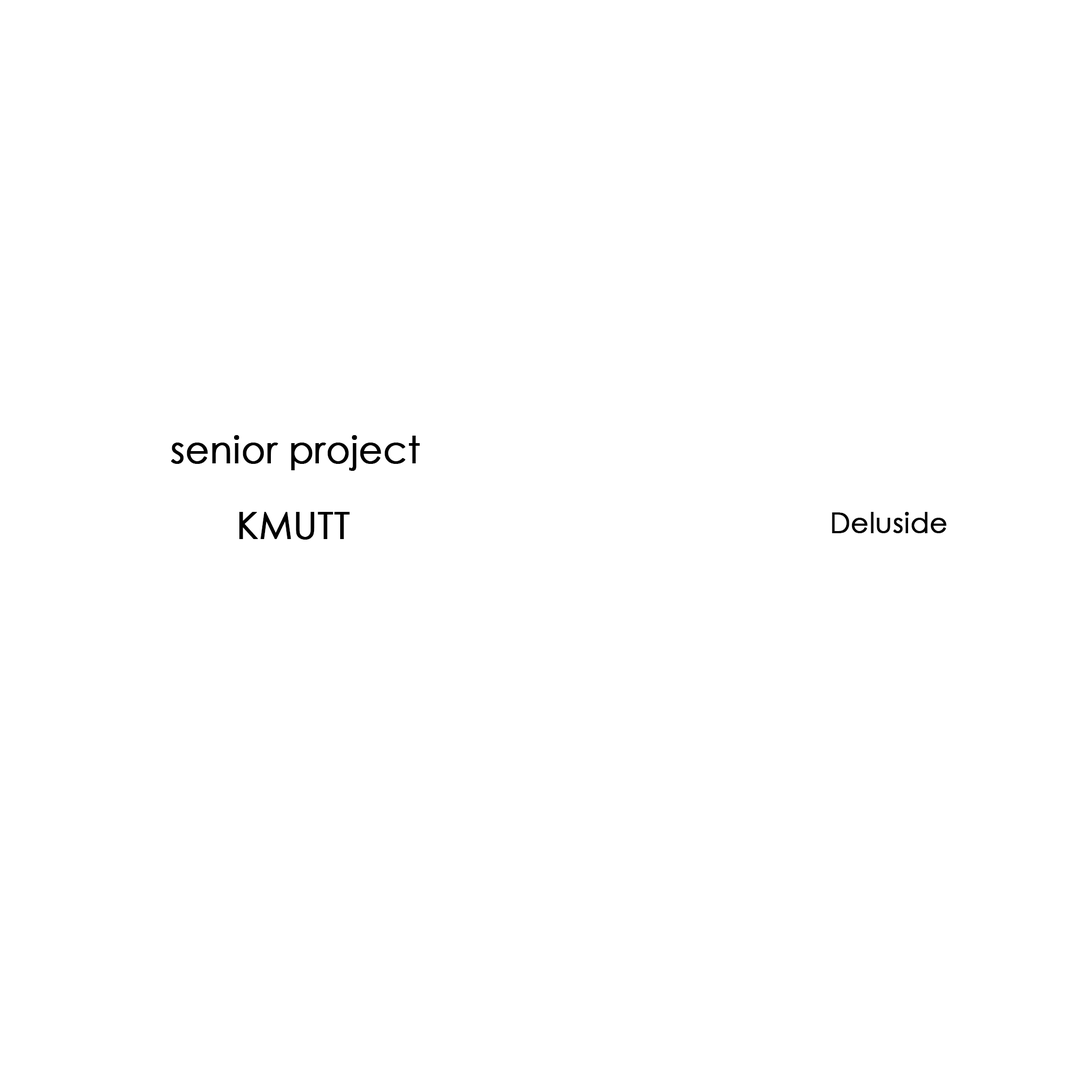
<style>
.page{position:relative;width:1092px;height:1092px;background:#ffffff}
.page>*{position:absolute;margin:0}
.t1{font:37px "CenturyGothic";color:#000000;font-weight:bold}
.t2{font:28px "CenturyGothic";color:#000000;font-weight:bold}
</style>
<div class="page">
<p class="t1" style="left:171px;top:435px;width:249px;height:36px">senior project</p>
<p class="t1" style="left:239px;top:512px;width:111px;height:28px">KMUTT</p>
<p class="t2" style="left:832px;top:512px;width:114px;height:21px">Deluside</p>
</div>
